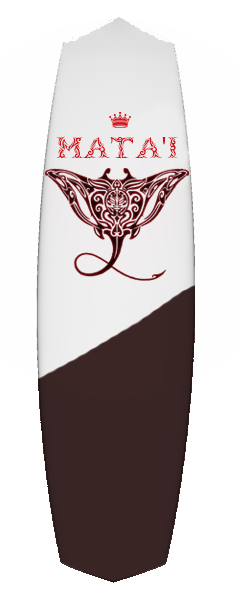
<style>
.page{position:relative;width:240px;height:612px;background:#ffffff}
.page>*{position:absolute;margin:0}
.t1{font:30px "Tribalcase";color:#cf111a}
.t2{font:30px "MyriadPro-Regular";color:#cf111a}
</style>
<div class="page">
<p class="t1" style="left:56px;top:136px;width:122px;height:22px">mata<span class="t2">'</span>i</p>
</div>
